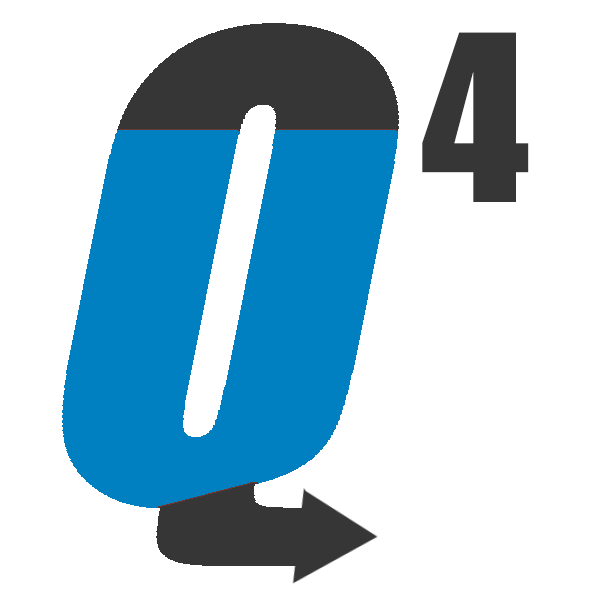
<style>
.page{position:relative;width:600px;height:600px;background:#ffffff}
.page>*{position:absolute;margin:0}
.t1{font:214.5px "Impact";letter-spacing:0.03em;color:#363636}
</style>
<div class="page">
<p class="t1" style="left:422px;top:32px;width:107px;height:170px">4</p>
</div>
